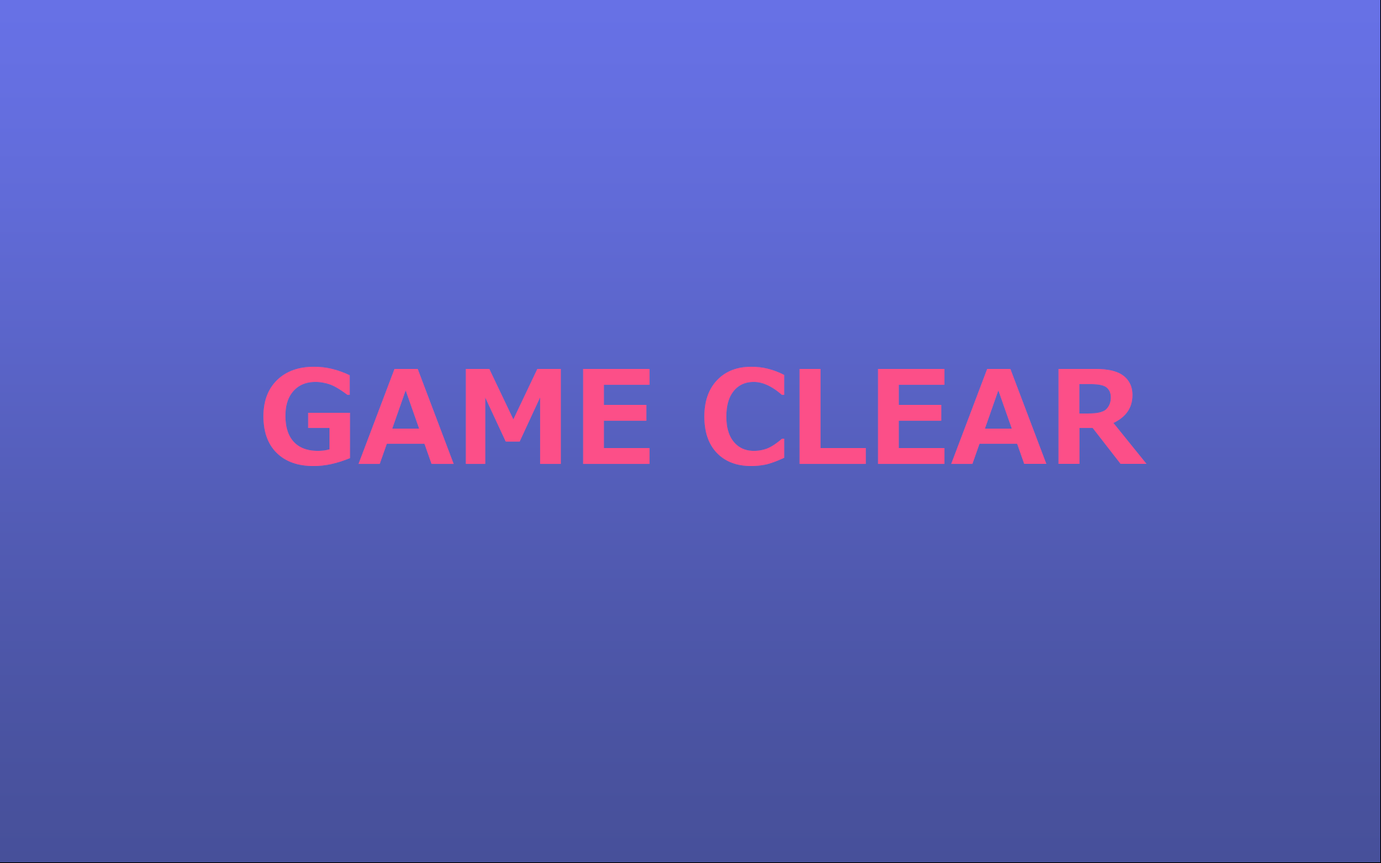
<style>
.page{position:relative;width:1381px;height:863px}
.page>*{position:absolute;margin:0}
.t1{font:129.5px "Meiryo-Bold";color:#fc4f88}
</style>
<div class="page">
<p class="t1" style="left:263px;top:367px;width:884px;height:99px">GAME CLEAR</p>
</div>
